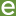
<style>
.page{position:relative;width:16px;height:16px;background:#64933a}
.page>*{position:absolute;margin:0}
.t1{font:28px "AvenirLTStd-Roman";color:#ffffff}
</style>
<div class="page">
<p class="t1" style="left:1px;top:1px;width:14px;height:14px">e</p>
</div>
